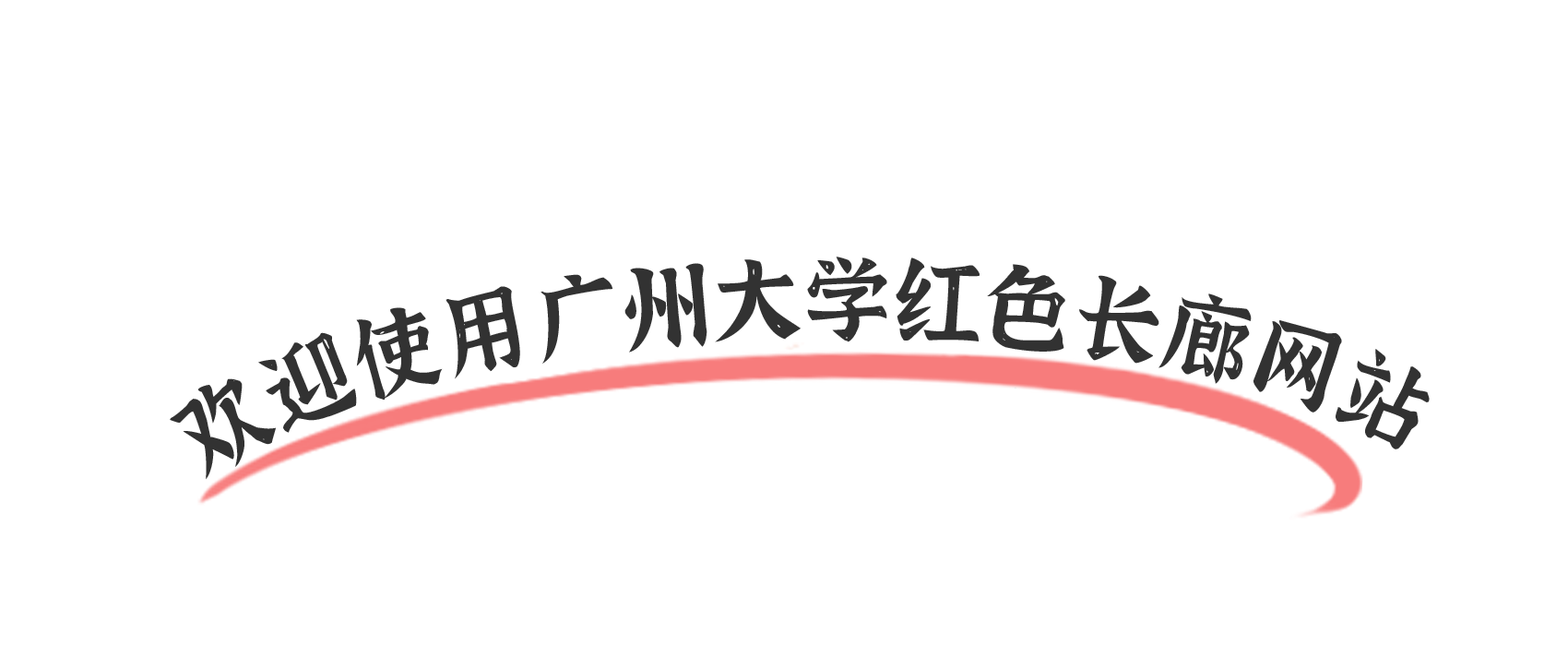
<style>
.page{position:relative;width:1568px;height:646px;background:#ffffff}
.page>*{position:absolute;margin:0}
.t1{font:89.7px "jiangxizhuokai";color:#323232}
</style>
<div class="page">
<p class="t1" style="left:170px;top:256px;width:1260px;height:224px;rotate:3deg">欢迎使用广州大学红色长廊网站</p>
</div>
